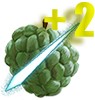
<style>
.page{position:relative;width:95px;height:100px;background:#ffffff}
.page>*{position:absolute;margin:0}
.t1{font:43.3px "Impact";color:#dcdf00}
</style>
<div class="page">
<p class="t1" style="left:44px;top:2px;width:51px;height:35px">+ 2</p>
</div>
